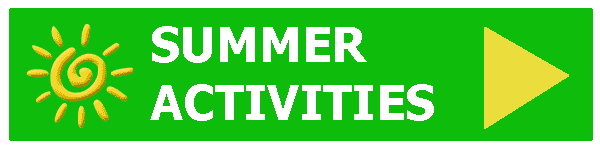
<style>
.page{position:relative;width:600px;height:150px;background:#0ebd0b}
.page>*{position:absolute;margin:0}
.t1{font:48px "Tahoma-Bold";color:#ffffff}
</style>
<div class="page">
<p class="t1" style="left:150px;top:26px;width:284px;height:95px">SUMMER<br>ACTIVITIES</p>
</div>
